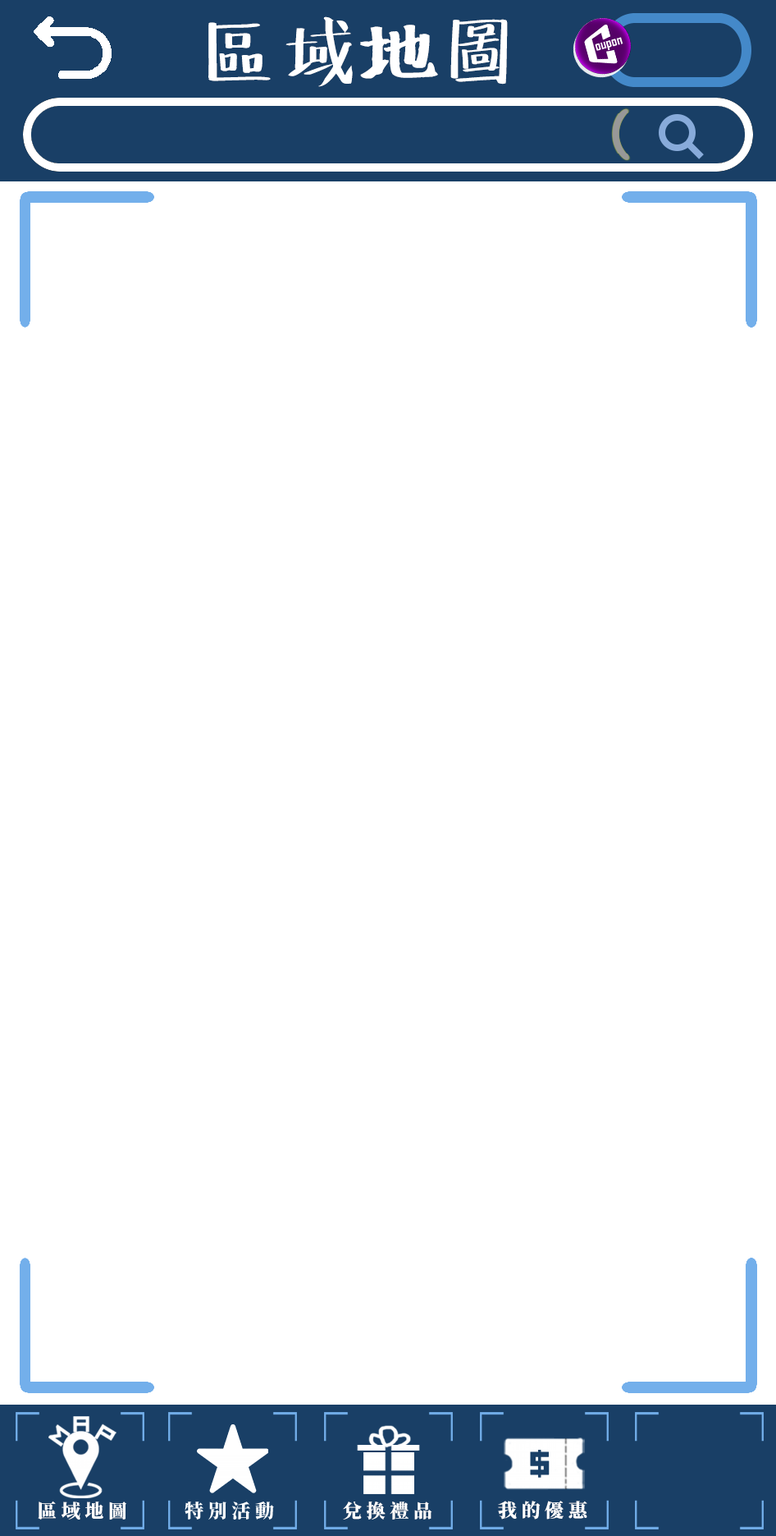
<style>
.page{position:relative;width:776px;height:1536px;background:#ffffff}
.page>*{position:absolute;margin:0}
.t1{font:74.4px "HanyiSentyChalkOriginal";color:#ffffff}
.t2{font:18.9px "SourceHanSerifSC-Heavy";color:#ffffff}
</style>
<div class="page">
<p class="t1" style="left:208px;top:16px;width:300px;height:71px">區域地圖</p>
<p class="t2" style="left:38px;top:1500px;width:88px;height:19px">區 域 地 圖</p>
<p class="t2" style="left:343px;top:1501px;width:90px;height:18px">兌 換 禮 品</p>
<p class="t2" style="left:498px;top:1500px;width:90px;height:19px">我 的 優 惠</p>
</div>
